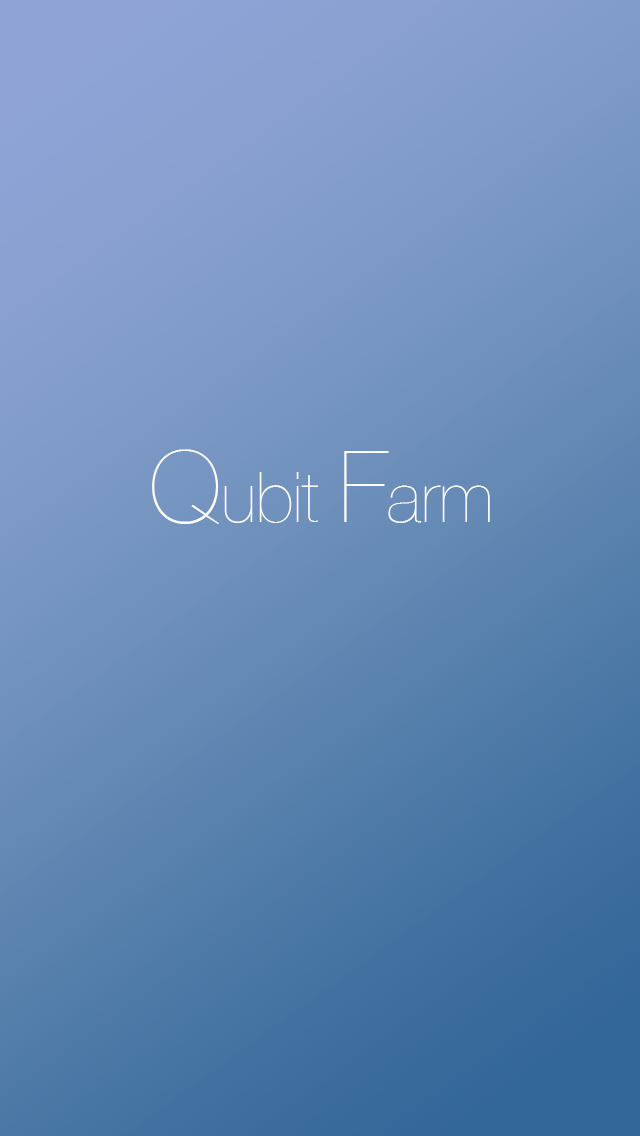
<style>
.page{position:relative;width:640px;height:1136px}
.page>*{position:absolute;margin:0}
.t1{font:70px "HelveticaNeue-UltraLight";color:#ffffff}
.t2{font:100px "HelveticaNeue-UltraLight";color:#ffffff}
.t3{font:70px "HelveticaNeue-UltraLight";letter-spacing:0.28em;color:#ffffff}
</style>
<div class="page">
<p class="t1" style="left:152px;top:449px;width:338px;height:75px"><span class="t2">Q</span>ubi<span class="t3">t</span><span class="t2">F</span>arm</p>
</div>
